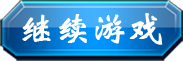
<style>
.page{position:relative;width:183px;height:61px}
.page>*{position:absolute;margin:0}
.t1{font:36px "STXinwei";letter-spacing:-0.02em;color:#ffffff;font-weight:bold}
</style>
<div class="page">
<p class="t1" style="left:22px;top:13px;width:141px;height:32px">继续游戏</p>
</div>
